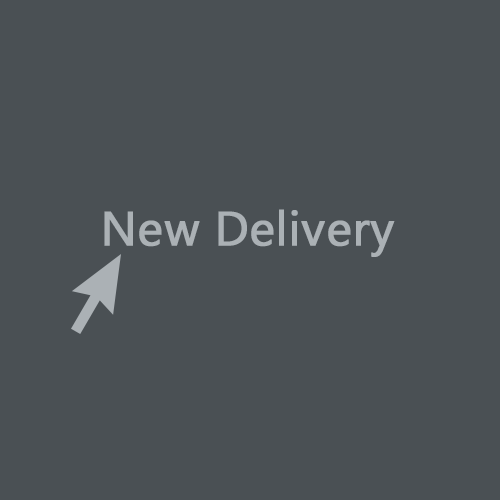
<style>
.page{position:relative;width:500px;height:500px;background:#4a5054}
.page>*{position:absolute;margin:0}
.t1{font:48px "Ebrima";color:#abb1b5;font-weight:bold}
</style>
<div class="page">
<p class="t1" style="left:104px;top:209px;width:291px;height:48px">New Delivery</p>
</div>
